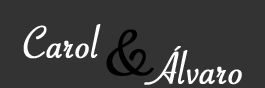
<style>
.page{position:relative;width:265px;height:88px;background:#333333}
.page>*{position:absolute;margin:0}
.t1{font:48px "SavoyeLetPlain";color:#ffffff;font-weight:bold}
.t2{font:72px "SavoyeLetPlain";color:#000000;font-weight:bold}
</style>
<div class="page">
<p class="t1" style="left:23px;top:24px;width:78px;height:35px">Carol</p>
<p class="t2" style="left:106px;top:29px;width:48px;height:47px">&amp;</p>
<p class="t1" style="left:144px;top:46px;width:98px;height:39px">Álvaro</p>
</div>
